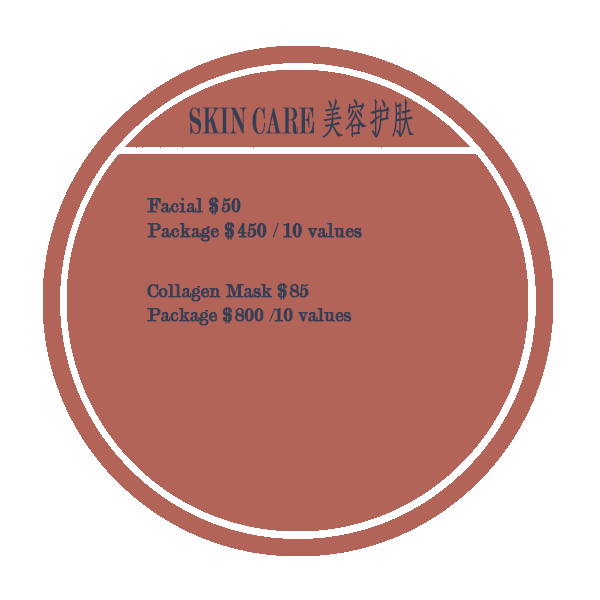
<style>
.page{position:relative;width:600px;height:600px;background:#b36458}
.page>*{position:absolute;margin:0}
.t1{font:39.2px "Modern-Regular";color:#353e55;font-weight:bold;scale:0.58 1}
.t2{font:39.2px "AdobeFangsongStd-Regular";color:#353e55;font-weight:bold;scale:0.58 1}
.t3{font:20.7px "Modern-Regular";color:#353e55;font-weight:bold}
.t4{font:20px "Modern-Regular";color:#353e55;font-weight:bold}
</style>
<div class="page">
<p class="t1" style="left:189px;top:99px;width:225px;height:39px">SKIN CARE <span class="t2">美容护肤</span></p>
<p class="t3" style="left:147px;top:197px;width:215px;height:45px">Facial $50<br>Package $450 / 10 values</p>
<p class="t4" style="left:147px;top:283px;width:205px;height:43px">Collagen Mask $85<br>Package $800 /10 values</p>
</div>
